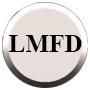
<style>
.page{position:relative;width:90px;height:90px;background:#ffffff}
.page>*{position:absolute;margin:0}
.t1{font:25.3px "TimesNewRomanPS-BoldMT";color:#000000}
</style>
<div class="page">
<p class="t1" style="left:9px;top:35px;width:73px;height:17px">LMFD</p>
</div>
